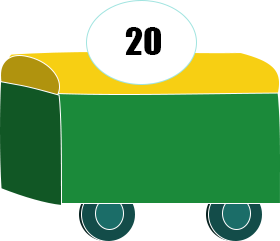
<style>
.page{position:relative;width:280px;height:241px;background:#1b8a3a}
.page>*{position:absolute;margin:0}
.t1{font:36px "Impact";color:#000000}
</style>
<div class="page">
<p class="t1" style="left:125px;top:27px;width:36px;height:28px">20</p>
</div>
